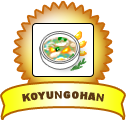
<style>
.page{position:relative;width:126px;height:120px;background:#ffffff}
.page>*{position:absolute;margin:0}
.t1{font:9.4px "Arial-Black";letter-spacing:0.045em;color:#5b3714;text-transform:uppercase}
</style>
<div class="page">
<p class="t1" style="left:22px;top:91px;width:82px;height:11px">koyungohan</p>
</div>
